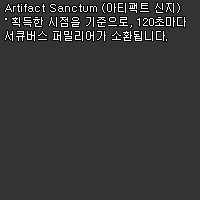
<style>
.page{position:relative;width:200px;height:200px;background:#333333}
.page>*{position:absolute;margin:0}
.t1{font:11px/14px "Dotum";color:#ffffff}
</style>
<div class="page">
<p class="t1" style="left:5px;top:3px;width:181px;height:38px">Artifact Sanctum (아티팩트 신지)<br>˚ 획득한 시점을 기준으로, 120초마다<br>서큐버스 퍼밀리어가 소환됩니다.</p>
</div>
